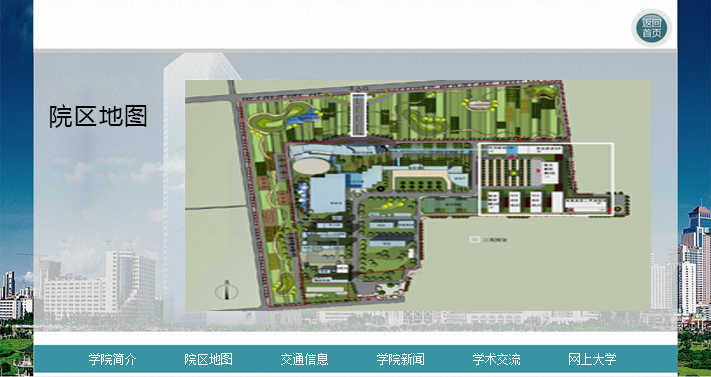
<style>
.page{position:relative;width:711px;height:377px}
.page>*{position:absolute;margin:0}
.t1{font:24px "MicrosoftYaHei";letter-spacing:0.05em;color:#000000}
.t2{font:12px "SimSun";color:#ffffff}
</style>
<div class="page">
<p class="t1" style="left:50px;top:104px;width:97px;height:24px">院区地图</p>
<p class="t2" style="left:89px;top:353px;width:527px;height:12px">学院简介        院区地图        交通信息        学院新闻        学术交流        网上大学</p>
</div>
